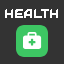
<style>
.page{position:relative;width:64px;height:64px;background:#333333}
.page>*{position:absolute;margin:0}
.t1{font:12px "Furore";letter-spacing:0.109em;color:#ffffff}
</style>
<div class="page">
<p class="t1" style="left:5px;top:9px;width:54px;height:9px">HEALTH</p>
</div>
